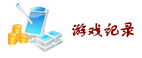
<style>
.page{position:relative;width:142px;height:58px;background:#ffffff}
.page>*{position:absolute;margin:0}
.t1{font:18px "FZSTK--GBK1-0";letter-spacing:-0.14em;color:#8a0303;font-weight:bold}
</style>
<div class="page">
<p class="t1" style="left:72px;top:22px;width:62px;height:16px">游戏记录</p>
</div>
